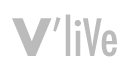
<style>
.page{position:relative;width:130px;height:72px;background:#ffffff}
.page>*{position:absolute;margin:0}
.t1{font:50px "Futura-CondensedMedium";color:#bbbbbb}
.t2{font:50px "Futura-Bold";color:#bbbbbb}
</style>
<div class="page">
<p class="t1" style="left:12px;top:14px;width:105px;height:43px"><span class="t2">V</span>’liVe</p>
</div>
